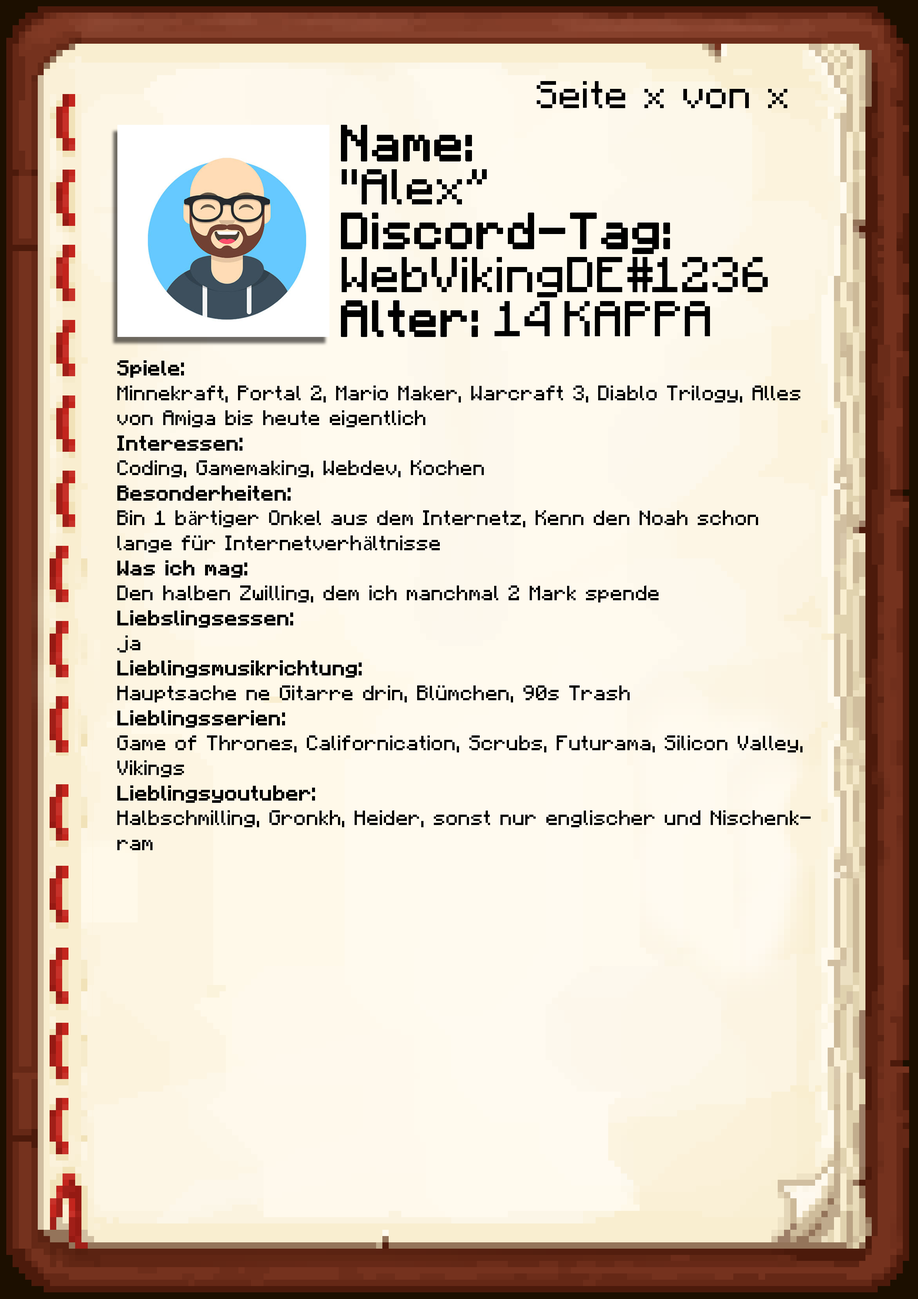
<style>
.page{position:relative;width:918px;height:1299px}
.page>*{position:absolute;margin:0}
.t1{font:38.6px "Minecraft-Regular";color:#000000}
.t2{font:40.1px/43.9px "Minecraft";color:#000000}
.t3{font:40.1px/43.9px "Minecraft";color:#000000;font-weight:bold}
.t4{font:20.8px "Minecraft-Regular";color:#000000}
.t5{font:20.8px "Minecraft-Regular";color:#000000;font-weight:bold}
.t6{font:20.8px "MyriadPro-Regular";color:#000000}
</style>
<div class="page">
<p class="t1" style="left:537px;top:81px;width:250px;height:27px">Seite x von x</p>
<p class="t2" style="left:341px;top:125px;width:427px;height:212px"><span class="t3">Name:<br></span>"Alex”<br><span class="t3">Discord-Tag:<br></span>WebVikingDE#1236<br><span class="t3">Alter: </span>14 KAPPA</p>
<p class="t4" style="left:117px;top:360px;width:694px;height:490px"><span class="t5">Spiele: <br></span>Minnekraft, Portal 2, Mario Maker, Warcraft 3, Diablo Trilogy, Alles von Amiga bis heute eigentlich<br><span class="t5">Interessen:<br></span>Coding, Gamemaking, Webdev, Kochen<br><span class="t5">Besonderheiten:<br></span>Bin 1 b<span class="t6">ä</span>rtiger Onkel aus dem Internetz, Kenn den Noah schon lange für Internetverh<span class="t6">ä</span>ltnisse<br><span class="t5">Was ich mag:<br></span>Den halben Zwilling, dem ich manchmal 2 Mark spende<br><span class="t5">Liebslingsessen:<br></span>ja<br><span class="t5">Lieblingsmusikrichtung:<br></span>Hauptsache ne Gitarre drin, Blümchen, 90s Trash<br><span class="t5">Lieblingsserien:<br></span>Game of Thrones, Californication, Scrubs, Futurama, Silicon Valley, Vikings<br><span class="t5">Lieblingsyoutuber:<br></span>Halbschmilling, Gronkh, Heider, sonst nur englischer und Nischenkram</p>
</div>
